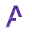
<style>
.page{position:relative;width:32px;height:32px;background:#ffffff}
.page>*{position:absolute;margin:0}
.t1{font:30px "ArialMT";letter-spacing:0.015em}
</style>
<div class="page">
<p class="t1" style="left:5px;top:5px;width:22px;height:23px">A</p>
</div>
